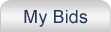
<style>
.page{position:relative;width:111px;height:32px}
.page>*{position:absolute;margin:0}
.t1{font:18px "ArialMT";letter-spacing:0.005em;color:#293958}
</style>
<div class="page">
<p class="t1" style="left:24px;top:10px;width:64px;height:17px">My Bids</p>
</div>
